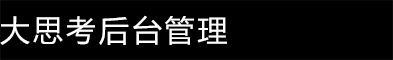
<style>
.page{position:relative;width:393px;height:60px;background:#000000}
.page>*{position:absolute;margin:0}
.t1{font:30px "MicrosoftYaHei";letter-spacing:0.1em;color:#ffffff}
</style>
<div class="page">
<p class="t1" style="left:0px;top:15px;width:227px;height:30px">大思考后台管理</p>
</div>
